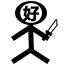
<style>
.page{position:relative;width:64px;height:64px;background:#ffffff}
.page>*{position:absolute;margin:0}
.t1{font:16px "MicrosoftYaHei-Bold";color:#000000}
</style>
<div class="page">
<p class="t1" style="left:23px;top:5px;width:16px;height:17px">好</p>
</div>
